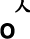
<style>
.page{position:relative;width:30px;height:39px;background:#ffffff}
.page>*{position:absolute;margin:0}
.t1{font:18px "DFKaiShu-SB-Estd-BF";color:#000000;font-weight:bold}
.t2{font:27px "ArialMT";color:#000000;font-weight:bold}
</style>
<div class="page">
<p class="t1" style="left:15px;top:0px;width:17px;height:13px">人</p>
<p class="t2" style="left:0px;top:23px;width:15px;height:16px">o</p>
</div>
